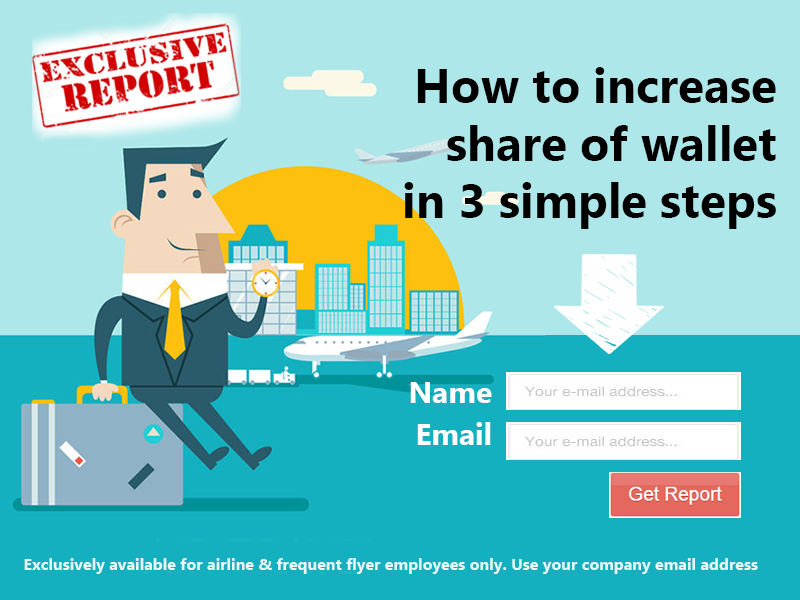
<style>
.page{position:relative;width:800px;height:600px;background:#ade7e9}
.page>*{position:absolute;margin:0}
.t1{font:48px "LaoUI-Bold";color:#000000}
.t2{font:30px/42px "LaoUI-Bold";color:#ffffff}
.t3{font:16px "LaoUI-Bold";color:#e8f8f9}
</style>
<div class="page">
<p class="t1" style="left:404px;top:67px;width:372px;height:162px;text-align:right">How to increase<br>share of wallet<br>in 3 simple steps</p>
<p class="t2" style="left:410px;top:382px;width:82px;height:63px;text-align:right">Name<br>Email</p>
<p class="t3" style="left:24px;top:558px;width:734px;height:16px">Exclusively available for airline &amp; frequent flyer employees only. Use your company email address</p>
</div>
